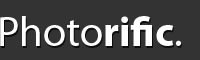
<style>
.page{position:relative;width:200px;height:60px;background:#333333}
.page>*{position:absolute;margin:0}
.t1{font:42px "MyriadPro-Regular";color:#ffffff}
.t2{font:42px "MyriadPro-Bold";color:#ffffff}
</style>
<div class="page">
<p class="t1" style="left:0px;top:16px;width:181px;height:30px">Photo<span class="t2">rific</span>.</p>
</div>
